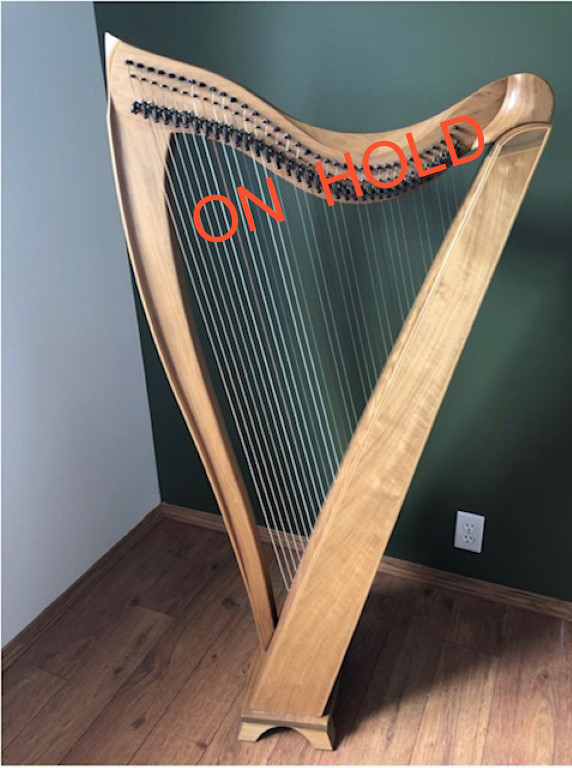
<style>
.page{position:relative;width:572px;height:768px}
.page>*{position:absolute;margin:0}
.t1{font:64px "ArialMT";color:#f7512f}
</style>
<div class="page">
<p class="t1" style="left:193px;top:116px;width:292px;height:127px;rotate:-18deg">ON  HOLD</p>
</div>
